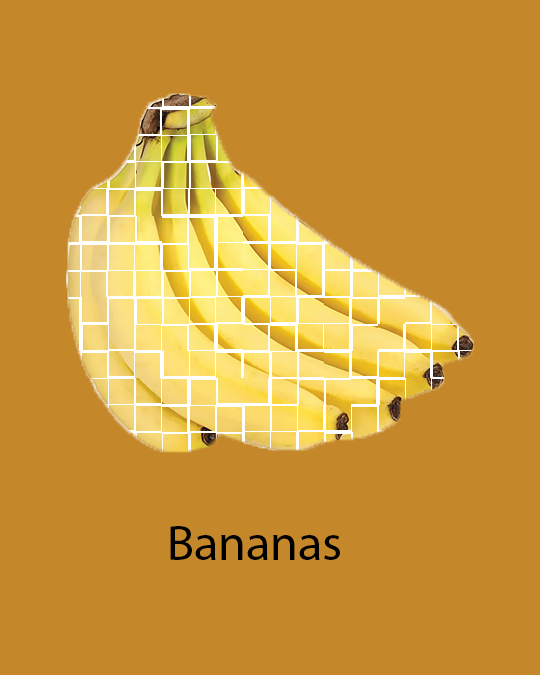
<style>
.page{position:relative;width:540px;height:675px;background:#c4882a}
.page>*{position:absolute;margin:0}
.t1{font:50px "MyriadPro-Regular";color:#000000}
</style>
<div class="page">
<p class="t1" style="left:170px;top:526px;width:170px;height:34px">Bananas</p>
</div>
